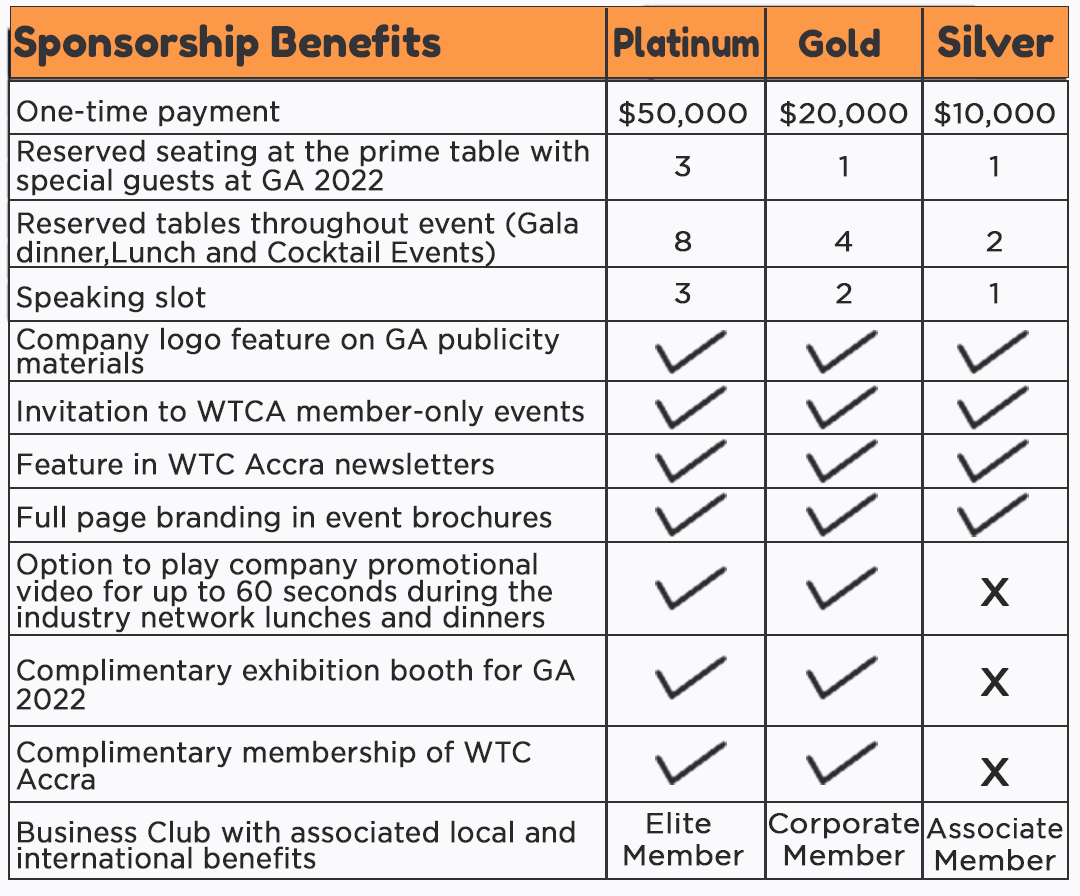
<style>
.page{position:relative;width:1080px;height:896px;background:#fafafd}
.page>*{position:absolute;margin:0}
.t1{font:42.4px "FredokaOne-Regular";color:#343438}
.t2{font:39.7px "FredokaOne-Regular";color:#343438;scale:0.86 1}
.t3{font:37.1px "FredokaOne-Regular";color:#343438}
.t4{font:29.1px/26.5px "Gotham-Book";color:#282828;font-weight:bold;scale:0.93 1}
.t5{font:29.1px/53px "Gotham-Book";color:#282828;font-weight:bold;scale:0.93 1}
.t6{font:29.1px/39.7px "Gotham-Book";color:#282828;font-weight:bold;scale:0.93 1}
.t7{font:29.1px/29.1px "Gotham-Book";color:#282828;font-weight:bold;scale:0.93 1}
.t8{font:29.1px/18.5px "Gotham-Book";color:#282828;font-weight:bold;scale:0.93 1}
.t9{font:29.1px/45px "Gotham-Book";color:#282828;font-weight:bold;scale:0.93 1}
.t10{font:29.1px/42.4px "Gotham-Book";color:#282828;font-weight:bold;scale:0.93 1}
.t11{font:29.1px/23.8px "Gotham-Book";color:#282828;font-weight:bold;scale:0.93 1}
.t12{font:29.1px/47.7px "Gotham-Book";color:#282828;font-weight:bold;scale:0.93 1}
.t13{font:29.1px/53px "Gotham-Book";color:#282828;font-weight:bold}
.t14{font:29.1px/74.1px "Gotham-Book";color:#282828;font-weight:bold}
.t15{font:29.1px/31.8px "Gotham-Book";color:#282828;font-weight:bold}
.t16{font:53px/90px "Gotham-Book";color:#282828;font-weight:bold}
.t17{font:29.1px/53px "Gotham-Book";color:#282828;font-weight:bold;scale:0.94 1}
</style>
<div class="page">
<p class="t1" style="left:14px;top:24px;width:1040px;height:43px">Sponsorship Benefits                <span class="t2">Platinum    </span><span class="t3">Gold      </span>Silver</p>
<p class="t4" style="left:16px;top:100px;width:573px;height:769px"><span class="t5">One-time payment<br></span><span class="t6">Reserved seating at the prime table with<br></span><span class="t7">special guests at GA 2022<br></span><span class="t5">Reserved tables throughout event (Gala <br></span><span class="t8">dinner,Lunch and Cocktail Events)<br></span><span class="t9">Speaking slot<br></span><span class="t10">Company logo feature on GA publicity <br></span><span class="t11">materials<br></span><span class="t12">Invitation to WTCA member-only events<br></span><span class="t5">Feature in WTC Accra newsletters<br>Full page branding in event brochures<br></span><span class="t12">Option to play company promotional <br></span>video for up to 60 seconds during the <br>industry network lunches and dinners<br><span class="t5">Complimentary exhibition booth for GA <br></span><span class="t7">2022<br></span><span class="t5">Complimentary membership of WTC <br></span>Accra<br><span class="t5">Business Club with associated local and<br></span>international benefits</p>
<p class="t13" style="left:619px;top:101px;width:128px;height:765px;text-align:center">$50,000<br>3<br><span class="t14">8<br></span>3<br><br><br><br><br><br><br><br><br><br>Elite <br><span class="t15">Member</span></p>
<p class="t13" style="left:769px;top:101px;width:151px;height:765px;text-align:center">$20,000<br>1<br><span class="t14">4<br></span>2<br><br><br><br><br><br><br><br><br><br>Corporate<br><span class="t15">Member</span></p>
<p class="t13" style="left:926px;top:101px;width:137px;height:770px;text-align:center">$10,000<br>1<br><span class="t14">2<br></span>1<br><br><br><br><br><span class="t16">x<br>x<br>x<br></span><span class="t17">Associate<br></span><span class="t15">Member</span></p>
</div>
